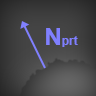
<style>
.page{position:relative;width:96px;height:96px}
.page>*{position:absolute;margin:0}
.t1{font:12px "Arial-BoldMT";color:#8080ff}
.t2{font:24px "Arial-BoldMT";color:#8080ff}
</style>
<div class="page">
<p class="t1" style="left:46px;top:28px;width:32px;height:19px"><span class="t2">N</span>prt</p>
</div>
